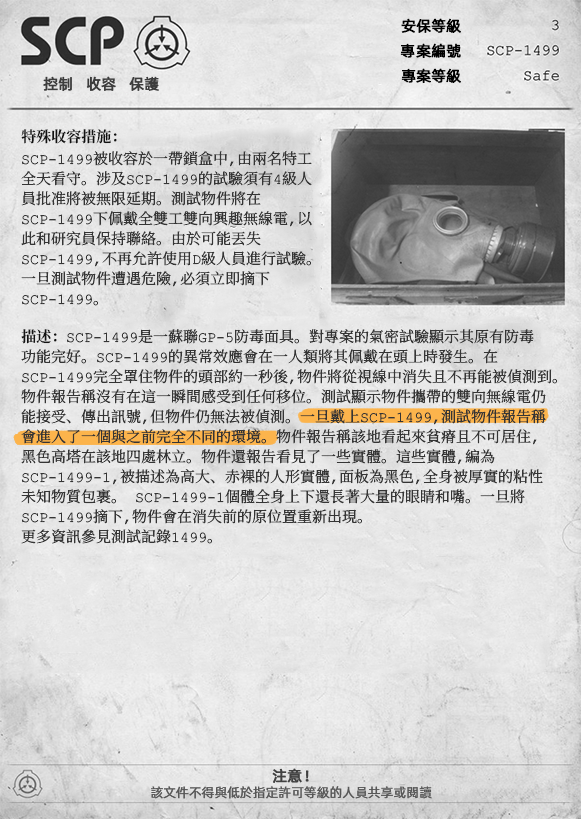
<style>
.page{position:relative;width:581px;height:819px}
.page>*{position:absolute;margin:0}
.t1{font:15px "AlibabaPuHuiTiR";color:#000000;font-weight:bold}
.t2{font:15px "AlibabaPuHuiTiR";color:#3d3d3d;font-weight:bold}
.t3{font:15px/20px "ContainmentBreach-Regular";color:#353535}
.t4{font:15px/22px "ContainmentBreach-Bold";color:#121212}
.t5{font:15px/20px "ContainmentBreach-Bold";color:#121212}
.t6{font:15px "AlibabaPuHuiTiR";color:#414141;font-weight:bold}
.t7{font:13px "AlibabaPuHuiTiR";color:#575757}
</style>
<div class="page">
<p class="t1" style="left:401px;top:18px;width:60px;height:15px">安保等級</p>
<p class="t1" style="left:400px;top:43px;width:61px;height:15px">專案編號</p>
<p class="t2" style="left:43px;top:76px;width:116px;height:15px">控制   收容   保護</p>
<p class="t1" style="left:401px;top:68px;width:60px;height:15px">專案等級</p>
<p class="t3" style="left:21px;top:129px;width:291px;height:177px"><span class="t4">特殊收容措施：<br></span>SCP-1499被收容於一帶鎖盒中，由兩名特工<br>全天看守。涉及SCP-1499的試驗須有4級人<br>員批准將被無限延期。測試物件將在<br>SCP-1499下佩戴全雙工雙向興趣無線電，以<br>此和研究員保持聯絡。由於可能丟失<br>SCP-1499，不再允許使用D級人員進行試驗。<br>一旦測試物件遭遇危險，必須立即摘下<br>SCP-1499。</p>
<p class="t3" style="left:21px;top:329px;width:536px;height:215px"><span class="t5">描述：</span>SCP-1499是一蘇聯GP-5防毒面具。對專案的氣密試驗顯示其原有防毒<br>功能完好。SCP-1499的異常效應會在一人類將其佩戴在頭上時發生。在<br>SCP-1499完全罩住物件的頭部約一秒後，物件將從視線中消失且不再能被偵測到。<br>物件報告稱沒有在這一瞬間感受到任何移位。測試顯示物件攜帶的雙向無線電仍<br>能接受、傳出訊號，但物件仍無法被偵測。一旦戴上SCP-1499，測試物件報告稱<br>會進入了一個與之前完全不同的環境。物件報告稱該地看起來貧瘠且不可居住，<br>黑色高塔在該地四處林立。物件還報告看見了一些實體。這些實體，編為<br>SCP-1499-1，被描述為高大、赤裸的人形實體，面板為黑色，全身被厚實的粘性<br>未知物質包裹。 SCP-1499-1個體全身上下還長著大量的眼睛和嘴。一旦將<br>SCP-1499摘下，物件會在消失前的原位置重新出現。<br>更多資訊參見測試記錄1499。</p>
<p class="t6" style="left:272px;top:768px;width:37px;height:15px">注意！</p>
<p class="t7" style="left:151px;top:786px;width:281px;height:13px">該文件不得與低於指定許可等級的人員共享或閱讀</p>
</div>
